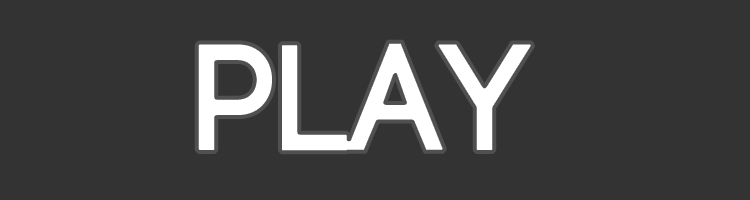
<style>
.page{position:relative;width:750px;height:200px;background:#333333}
.page>*{position:absolute;margin:0}
.t1{font:150px "Code-Bold";color:#ffffff;font-weight:bold}
</style>
<div class="page">
<p class="t1" style="left:196px;top:41px;width:337px;height:112px">PLAY</p>
</div>
